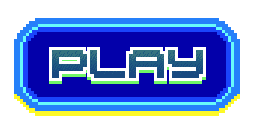
<style>
.page{position:relative;width:259px;height:135px;background:#ffffff}
.page>*{position:absolute;margin:0}
.t1{font:28px "04b20";letter-spacing:0.02em;color:#1f5a80;text-transform:uppercase}
</style>
<div class="page">
<p class="t1" style="left:52px;top:50px;width:151px;height:28px">PLAY</p>
</div>
